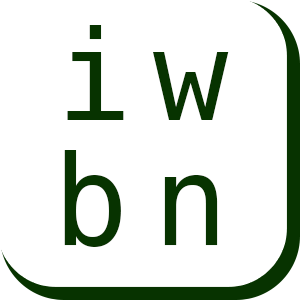
<style>
.page{position:relative;width:300px;height:300px;background:#ffffff}
.page>*{position:absolute;margin:0}
.t1{font:125px/125px "Menlo-Regular";letter-spacing:0.2em;color:#073300}
</style>
<div class="page">
<p class="t1" style="left:64px;top:25px;width:165px;height:222px;text-align:center">iw<br>bn</p>
</div>
